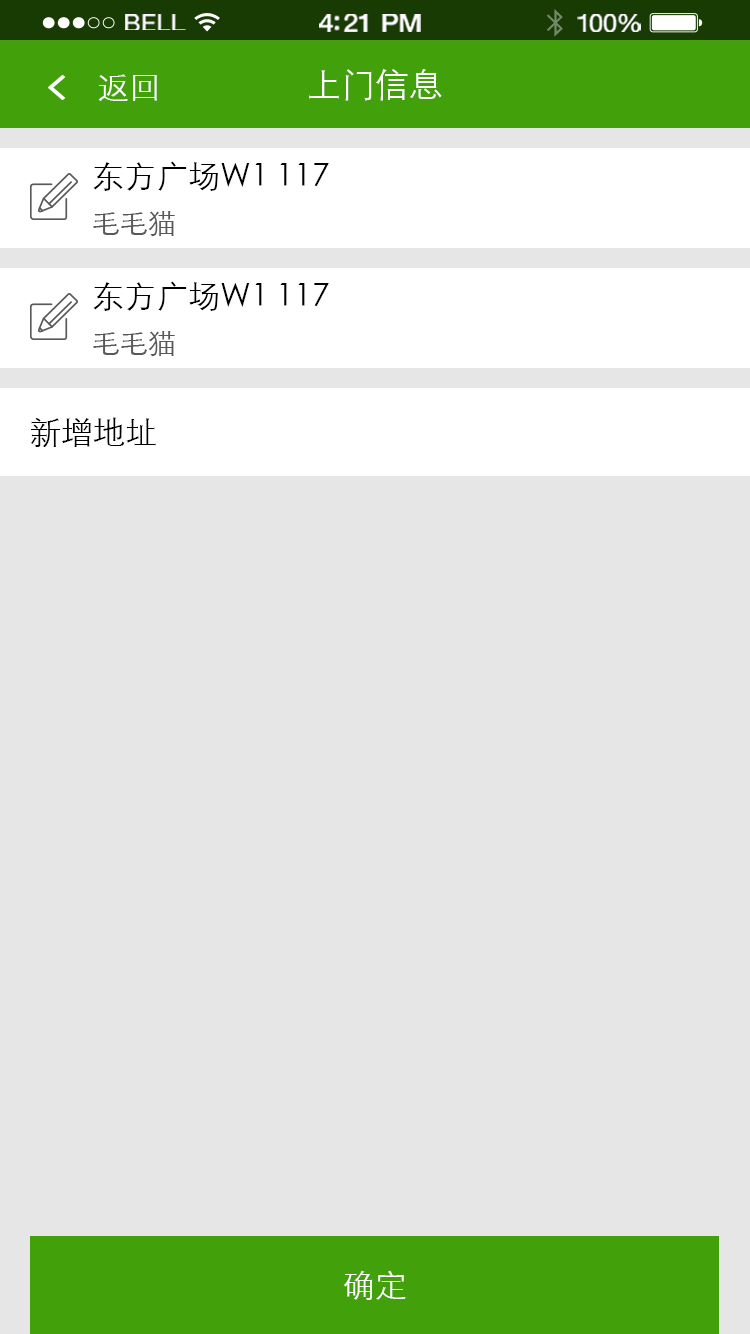
<style>
.page{position:relative;width:750px;height:1334px;background:#e6e6e6}
.page>*{position:absolute;margin:0}
.t1{font:23.3px "HelveticaNeue";letter-spacing:0.02em;color:#ffffff;scale:1.06 1}
.t2{font:25.3px "HelveticaNeue-Medium";letter-spacing:-0.02em;color:#ffffff;scale:1.06 1}
.t3{font:24.3px "HelveticaNeue";letter-spacing:-0.02em;color:#ffffff;scale:1.06 1}
.t4{font:32px "STXihei";color:#ffffff}
.t5{font:34px "STXihei";color:#ffffff}
.t6{font:32px "STXihei";color:#000000}
.t7{font:28px "STXihei";color:#595757}
.t8{font:32px "STXihei";color:#fffefe}
</style>
<div class="page">
<p class="t1" style="left:125px;top:14px;width:61px;height:16px">BELL</p>
<p class="t2" style="left:319px;top:14px;width:102px;height:18px">4:21 PM</p>
<p class="t3" style="left:577px;top:14px;width:64px;height:18px">100%</p>
<p class="t4" style="left:98px;top:74px;width:59px;height:27px">返回</p>
<p class="t5" style="left:309px;top:69px;width:133px;height:32px">上门信息</p>
<p class="t6" style="left:93px;top:161px;width:236px;height:30px">东方广场W1 117</p>
<p class="t7" style="left:93px;top:211px;width:82px;height:26px">毛毛猫</p>
<p class="t6" style="left:93px;top:281px;width:236px;height:30px">东方广场W1 117</p>
<p class="t7" style="left:93px;top:331px;width:82px;height:26px">毛毛猫</p>
<p class="t6" style="left:31px;top:417px;width:125px;height:30px">新增地址</p>
<p class="t8" style="left:343px;top:1270px;width:63px;height:30px">确定</p>
</div>
